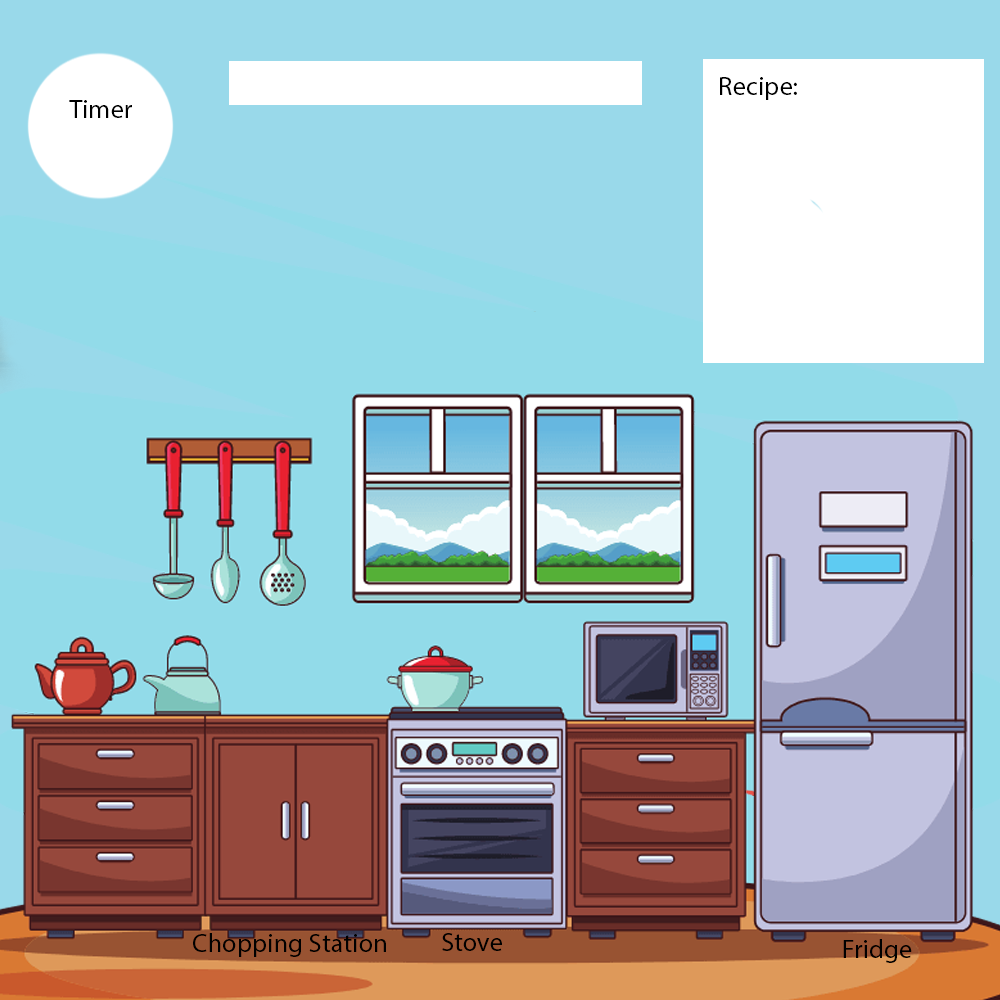
<style>
.page{position:relative;width:1000px;height:1000px;background:#92dbe9}
.page>*{position:absolute;margin:0}
.t1{font:26.7px "MyriadPro-Regular";color:#000000}
</style>
<div class="page">
<p class="t1" style="left:720px;top:77px;width:77px;height:23px">Recipe:</p>
<p class="t1" style="left:69px;top:100px;width:63px;height:18px">Timer</p>
<p class="t1" style="left:193px;top:933px;width:193px;height:24px">Chopping Station</p>
<p class="t1" style="left:442px;top:933px;width:60px;height:18px">Stove</p>
<p class="t1" style="left:843px;top:939px;width:69px;height:24px">Fridge</p>
</div>
